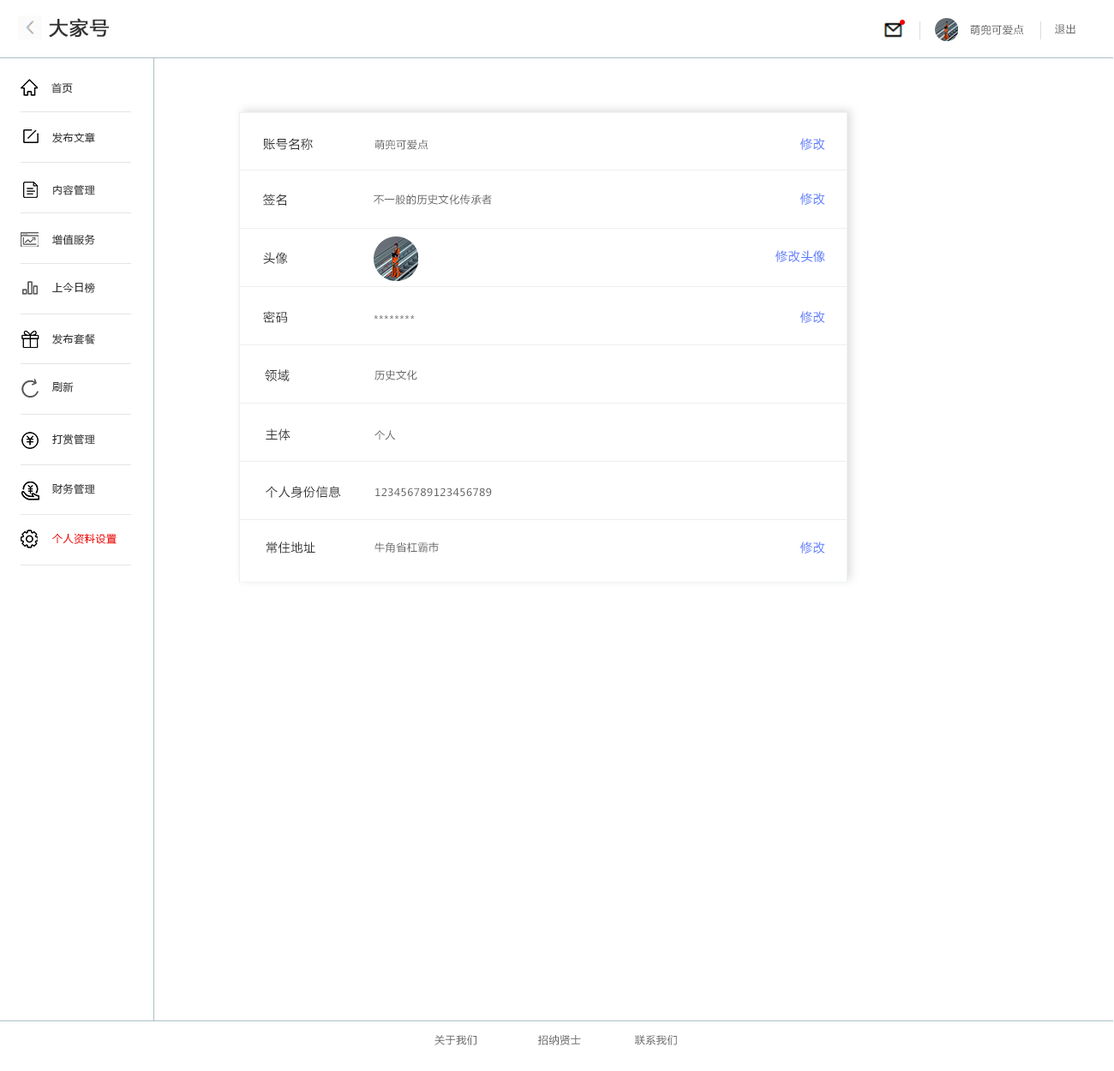
<style>
.page{position:relative;width:1114px;height:1071px;background:#ffffff}
.page>*{position:absolute;margin:0}
.t1{font:18.8px "MicrosoftYaHei";letter-spacing:0.05em;color:#333333;font-weight:bold}
.t2{font:10.3px "MicrosoftYaHei";letter-spacing:0.05em;color:#666666}
.t3{font:10.3px "MicrosoftYaHei";letter-spacing:0.05em;color:#333333}
.t4{font:12px "MicrosoftYaHei";letter-spacing:0.05em;color:#333333}
.t5{font:12px "MicrosoftYaHei";letter-spacing:0.05em;color:#5779f9}
.t6{font:10.3px "MicrosoftYaHei";letter-spacing:0.05em}
.t7{font:10.3px "MicrosoftYaHei";letter-spacing:0.05em;color:#f00000}
</style>
<div class="page">
<p class="t1" style="left:49px;top:18px;width:60px;height:20px">大家号</p>
<p class="t2" style="left:970px;top:25px;width:54px;height:10px">萌兜可爱点</p>
<p class="t2" style="left:1055px;top:24px;width:20px;height:10px">退出</p>
<p class="t3" style="left:51px;top:82px;width:22px;height:11px">首页</p>
<p class="t3" style="left:52px;top:132px;width:43px;height:11px">发布文章</p>
<p class="t4" style="left:263px;top:138px;width:50px;height:12px">账号名称</p>
<p class="t5" style="left:800px;top:138px;width:25px;height:12px">修改</p>
<p class="t2" style="left:374px;top:140px;width:53px;height:10px">萌兜可爱点</p>
<p class="t3" style="left:53px;top:184px;width:42px;height:11px">内容管理</p>
<p class="t4" style="left:263px;top:194px;width:23px;height:12px">签名</p>
<p class="t2" style="left:373px;top:194px;width:119px;height:11px">不一般的历史文化传承者</p>
<p class="t5" style="left:800px;top:193px;width:25px;height:12px">修改</p>
<p class="t3" style="left:52px;top:234px;width:43px;height:11px">增值服务</p>
<p class="t4" style="left:263px;top:252px;width:25px;height:12px">头像</p>
<p class="t5" style="left:775px;top:250px;width:50px;height:12px">修改头像</p>
<p class="t3" style="left:52px;top:282px;width:43px;height:11px">上今日榜</p>
<p class="t4" style="left:263px;top:311px;width:24px;height:12px">密码</p>
<p class="t6" style="left:373px;top:314px;width:42px;height:6px">********</p>
<p class="t5" style="left:800px;top:311px;width:25px;height:12px">修改</p>
<p class="t3" style="left:52px;top:333px;width:43px;height:11px">发布套餐</p>
<p class="t4" style="left:265px;top:369px;width:25px;height:12px">领域</p>
<p class="t2" style="left:374px;top:370px;width:43px;height:10px">历史文化</p>
<p class="t3" style="left:52px;top:382px;width:22px;height:10px">刷新</p>
<p class="t3" style="left:52px;top:433px;width:43px;height:12px">打赏管理</p>
<p class="t4" style="left:266px;top:428px;width:24px;height:12px">主体</p>
<p class="t2" style="left:374px;top:430px;width:22px;height:10px">个人</p>
<p class="t3" style="left:52px;top:483px;width:43px;height:11px">财务管理</p>
<p class="t4" style="left:266px;top:486px;width:75px;height:12px">个人身份信息</p>
<p class="t2" style="left:375px;top:487px;width:117px;height:9px">123456789123456789</p>
<p class="t7" style="left:52px;top:533px;width:65px;height:11px">个人资料设置</p>
<p class="t4" style="left:266px;top:541px;width:49px;height:12px">常住地址</p>
<p class="t2" style="left:374px;top:541px;width:65px;height:12px">牛角省杠霸市</p>
<p class="t5" style="left:800px;top:541px;width:25px;height:12px">修改</p>
<p class="t2" style="left:434px;top:1035px;width:243px;height:10px">关于我们                 招纳贤士               联系我们</p>
</div>
